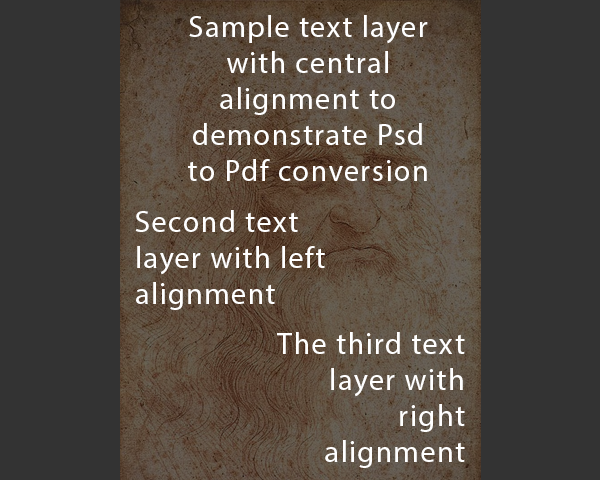
<style>
.page{position:relative;width:600px;height:480px;background:#333333}
.page>*{position:absolute;margin:0}
.t1{font:30px "MyriadPro-Regular";letter-spacing:0.05em;color:#ffffff}
</style>
<div class="page">
<p class="t1" style="left:188px;top:15px;width:240px;height:166px;text-align:center">Sample text layer with central alignment to demonstrate Psd to Pdf conversion</p>
<p class="t1" style="left:135px;top:210px;width:190px;height:100px">Second text layer with left alignment</p>
<p class="t1" style="left:277px;top:332px;width:188px;height:136px;text-align:right">The third text layer with right alignment</p>
</div>
